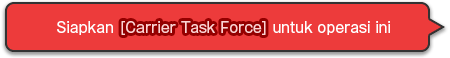
<style>
.page{position:relative;width:450px;height:58px;background:#ed3b3b}
.page>*{position:absolute;margin:0}
.t1{font:14px "GothicMB101Pro-Regular";color:#ffffff}
</style>
<div class="page">
<p class="t1" style="left:57px;top:21px;width:333px;height:14px">Siapkan                                  untuk operasi ini</p>
</div>
